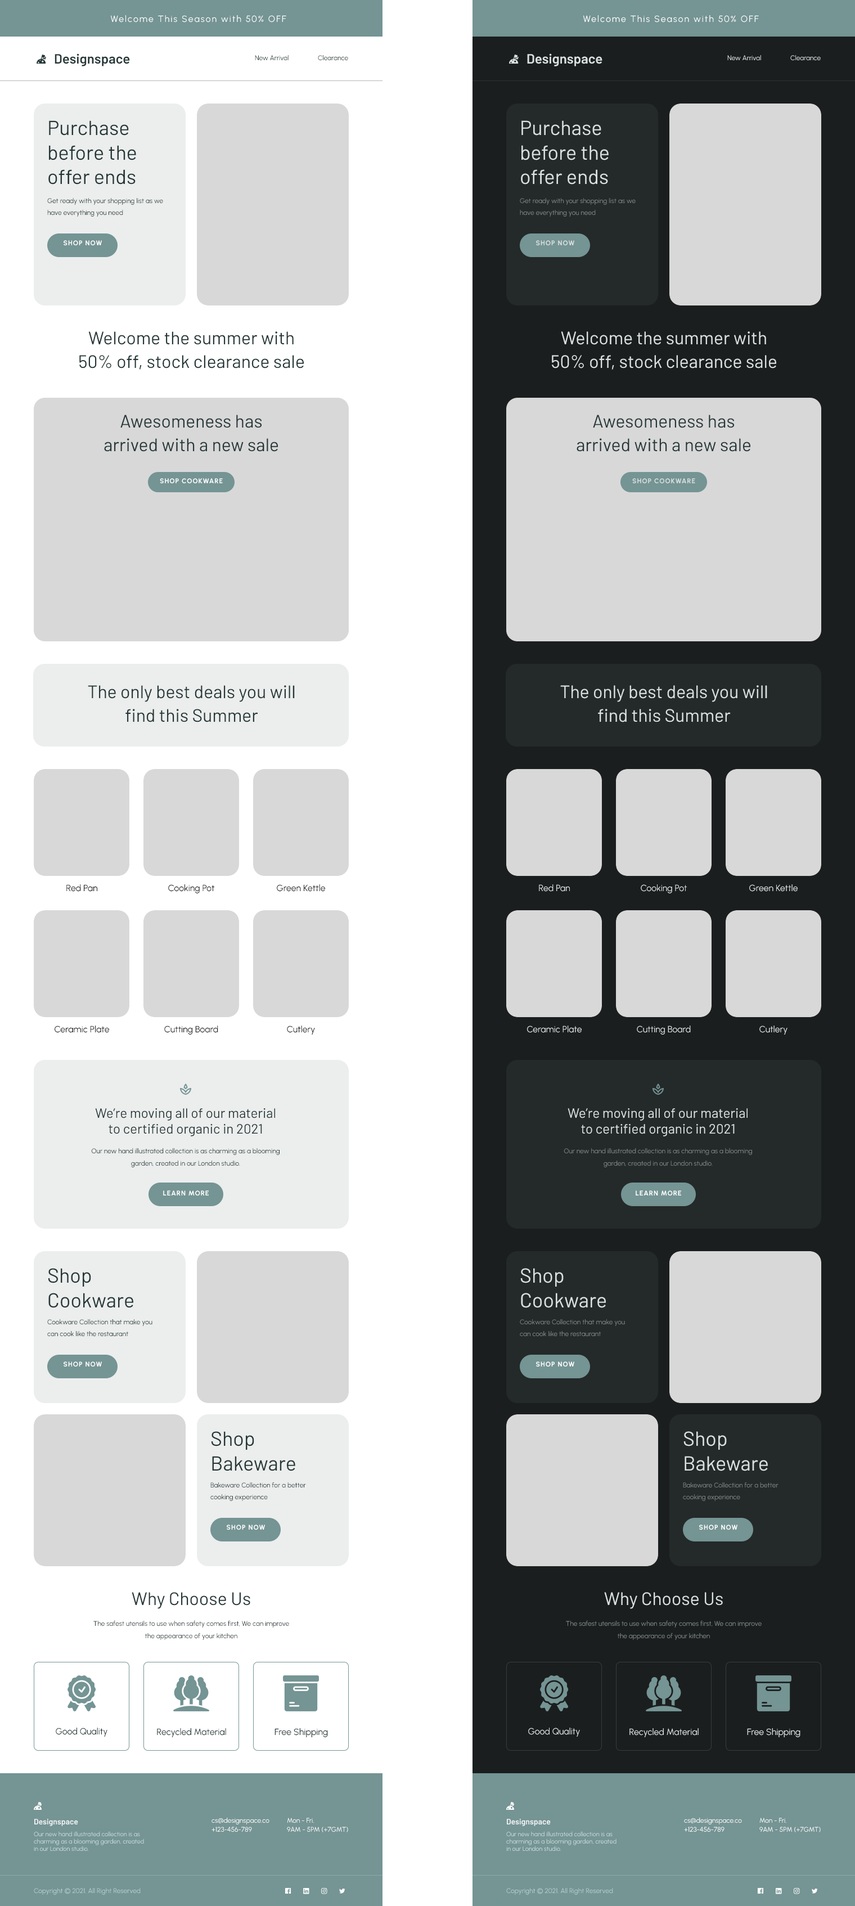
<style>
.page{position:relative;width:855px;height:1906px;background:#ffffff}
.page>*{position:absolute;margin:0}
.t1{font:9px "Urbanist-Regular";letter-spacing:0.125em;color:#ffffff}
.t2{font:13.5px "Barlow-SemiBold";color:#263737}
.t3{font:13.5px "Barlow-SemiBold";color:#dae0e0}
.t4{font:6.8px "Urbanist-Regular";color:#263737}
.t5{font:6.8px "Urbanist-Regular";color:#dae0e0}
.t6{font:20.2px "Barlow-Regular";color:#263737}
.t7{font:20.2px "Barlow-Regular";color:#dae0e0}
.t8{font:6.8px/11.8px "Urbanist-Regular";color:#263737}
.t9{font:6.8px/11.8px "Urbanist-Regular";color:#7d8686}
.t10{font:6.8px "Urbanist-Bold";letter-spacing:0.083em;color:#ffffff;text-transform:uppercase}
.t11{font:6.8px "Urbanist-Bold";letter-spacing:0.083em;color:#dae0e0;text-transform:uppercase}
.t12{font:18px/23.6px "Barlow-Regular";color:#263737}
.t13{font:18px/23.6px "Barlow-Regular";color:#dae0e0}
.t14{font:9px "Urbanist-Regular";color:#1b1b1b}
.t15{font:9px "Urbanist-Regular";color:#dae0e0}
.t16{font:13.5px "Barlow-Regular";color:#263737}
.t17{font:13.5px "Barlow-Regular";color:#dae0e0}
.t18{font:6.8px/12.4px "Urbanist-Regular";color:#263737}
.t19{font:6.8px/12.4px "Urbanist-Regular";color:#7d8686}
.t20{font:18px "Barlow-Regular";color:#263737}
.t21{font:18px "Barlow-Regular";color:#dae0e0}
.t22{font:9px "Urbanist-Regular";color:#263737}
.t23{font:6.8px/9px "Urbanist-Regular";color:#ffffff}
.t24{font:7.9px "Barlow-SemiBold";color:#f3f5f7}
.t25{font:6.2px/7.3px "Urbanist-Regular";color:#cadddd}
.t26{font:6.8px "Urbanist-Regular";color:#b7d1d1}
</style>
<div class="page">
<p class="t1" style="left:110px;top:15px;width:176px;height:7px">Welcome This Season with 50% OFF</p>
<p class="t1" style="left:583px;top:15px;width:176px;height:7px">Welcome This Season with 50% OFF</p>
<p class="t2" style="left:55px;top:53px;width:75px;height:13px">Designspace</p>
<p class="t3" style="left:527px;top:53px;width:75px;height:13px">Designspace</p>
<p class="t4" style="left:255px;top:55px;width:34px;height:6px">New Arrival</p>
<p class="t4" style="left:318px;top:55px;width:30px;height:6px">Clearance</p>
<p class="t5" style="left:727px;top:55px;width:34px;height:6px">New Arrival</p>
<p class="t5" style="left:790px;top:55px;width:31px;height:6px">Clearance</p>
<p class="t6" style="left:48px;top:120px;width:88px;height:64px">Purchase before the offer ends</p>
<p class="t7" style="left:521px;top:120px;width:88px;height:64px">Purchase before the offer ends</p>
<p class="t8" style="left:47px;top:198px;width:116px;height:19px">Get ready with your shopping list as we have everything you need</p>
<p class="t9" style="left:520px;top:198px;width:116px;height:19px">Get ready with your shopping list as we have everything you need</p>
<p class="t10" style="left:64px;top:240px;width:38px;height:6px">Shop Now</p>
<p class="t11" style="left:536px;top:240px;width:39px;height:6px">Shop Now</p>
<p class="t12" style="left:79px;top:331px;width:225px;height:39px;text-align:center">Welcome the summer with 50% off, stock clearance sale</p>
<p class="t12" style="left:79px;top:331px;width:225px;height:39px;text-align:center">Welcome the summer with 50% off, stock clearance sale</p>
<p class="t13" style="left:552px;top:331px;width:224px;height:39px;text-align:center">Welcome the summer with 50% off, stock clearance sale</p>
<p class="t13" style="left:552px;top:331px;width:224px;height:39px;text-align:center">Welcome the summer with 50% off, stock clearance sale</p>
<p class="t12" style="left:104px;top:415px;width:174px;height:37px;text-align:center">Awesomeness has arrived with a new sale</p>
<p class="t12" style="left:577px;top:415px;width:174px;height:37px;text-align:center">Awesomeness has arrived with a new sale</p>
<p class="t10" style="left:160px;top:478px;width:63px;height:6px">Shop Cookware</p>
<p class="t11" style="left:632px;top:478px;width:63px;height:6px">Shop Cookware</p>
<p class="t12" style="left:88px;top:685px;width:207px;height:37px;text-align:center">The only best deals you will find this Summer</p>
<p class="t13" style="left:560px;top:685px;width:207px;height:37px;text-align:center">The only best deals you will find this Summer</p>
<p class="t14" style="left:66px;top:884px;width:32px;height:8px">Red Pan</p>
<p class="t14" style="left:168px;top:884px;width:46px;height:9px">Cooking Pot</p>
<p class="t14" style="left:277px;top:884px;width:49px;height:8px">Green Kettle</p>
<p class="t15" style="left:539px;top:884px;width:31px;height:8px">Red Pan</p>
<p class="t15" style="left:641px;top:884px;width:46px;height:9px">Cooking Pot</p>
<p class="t15" style="left:749px;top:884px;width:49px;height:8px">Green Kettle</p>
<p class="t14" style="left:55px;top:1025px;width:55px;height:8px">Ceramic Plate</p>
<p class="t14" style="left:164px;top:1025px;width:54px;height:9px">Cutting Board</p>
<p class="t14" style="left:287px;top:1025px;width:28px;height:9px">Cutlery</p>
<p class="t15" style="left:527px;top:1025px;width:55px;height:8px">Ceramic Plate</p>
<p class="t15" style="left:637px;top:1025px;width:54px;height:9px">Cutting Board</p>
<p class="t15" style="left:759px;top:1025px;width:29px;height:9px">Cutlery</p>
<p class="t16" style="left:95px;top:1108px;width:181px;height:28px;text-align:center">We’re moving all of our material<br>to certified organic in 2021</p>
<p class="t17" style="left:568px;top:1108px;width:180px;height:28px;text-align:center">We’re moving all of our material<br>to certified organic in 2021</p>
<p class="t18" style="left:91px;top:1148px;width:189px;height:19px;text-align:center">Our new hand illustrated collection is as charming as a blooming garden, created in our London studio.</p>
<p class="t19" style="left:564px;top:1148px;width:188px;height:19px;text-align:center">Our new hand illustrated collection is as charming as a blooming garden, created in our London studio.</p>
<p class="t10" style="left:163px;top:1190px;width:46px;height:6px">LEARN MORE</p>
<p class="t10" style="left:636px;top:1190px;width:45px;height:6px">LEARN MORE</p>
<p class="t6" style="left:48px;top:1268px;width:85px;height:40px">Shop Cookware</p>
<p class="t7" style="left:520px;top:1268px;width:86px;height:40px">Shop Cookware</p>
<p class="t8" style="left:47px;top:1319px;width:105px;height:17px">Cookware Collection that make you can cook like the restaurant</p>
<p class="t9" style="left:520px;top:1319px;width:105px;height:17px">Cookware Collection that make you can cook like the restaurant</p>
<p class="t10" style="left:64px;top:1361px;width:38px;height:6px">Shop Now</p>
<p class="t10" style="left:536px;top:1361px;width:39px;height:6px">Shop Now</p>
<p class="t6" style="left:211px;top:1431px;width:84px;height:40px">Shop Bakeware</p>
<p class="t7" style="left:683px;top:1431px;width:85px;height:40px">Shop Bakeware</p>
<p class="t8" style="left:210px;top:1482px;width:96px;height:19px">Bakeware Collection for a better cooking experience</p>
<p class="t9" style="left:683px;top:1482px;width:95px;height:19px">Bakeware Collection for a better cooking experience</p>
<p class="t10" style="left:227px;top:1524px;width:39px;height:6px">Shop Now</p>
<p class="t10" style="left:699px;top:1524px;width:39px;height:6px">Shop Now</p>
<p class="t20" style="left:132px;top:1592px;width:118px;height:17px">Why Choose Us</p>
<p class="t21" style="left:604px;top:1592px;width:119px;height:17px">Why Choose Us</p>
<p class="t18" style="left:93px;top:1620px;width:196px;height:20px;text-align:center">The safest utensils to use when safety comes first, We can improve the appearance of your kitchen</p>
<p class="t19" style="left:566px;top:1620px;width:196px;height:20px;text-align:center">The safest utensils to use when safety comes first, We can improve the appearance of your kitchen</p>
<p class="t22" style="left:56px;top:1727px;width:51px;height:9px">Good Quality</p>
<p class="t22" style="left:157px;top:1728px;width:69px;height:9px">Recycled Material</p>
<p class="t22" style="left:274px;top:1728px;width:54px;height:9px">Free Shipping</p>
<p class="t15" style="left:528px;top:1727px;width:52px;height:9px">Good Quality</p>
<p class="t15" style="left:629px;top:1728px;width:70px;height:9px">Recycled Material</p>
<p class="t15" style="left:747px;top:1728px;width:53px;height:9px">Free Shipping</p>
<p class="t23" style="left:212px;top:1817px;width:57px;height:15px">cs@designspace.co<br>+123-456-789</p>
<p class="t23" style="left:287px;top:1817px;width:61px;height:15px">Mon - Fri.<br>9AM - 5PM (+7GMT)</p>
<p class="t23" style="left:684px;top:1817px;width:58px;height:15px">cs@designspace.co<br>+123-456-789</p>
<p class="t23" style="left:759px;top:1817px;width:62px;height:15px">Mon - Fri.<br>9AM - 5PM (+7GMT)</p>
<p class="t24" style="left:34px;top:1818px;width:44px;height:8px">Designspace</p>
<p class="t24" style="left:507px;top:1818px;width:44px;height:8px">Designspace</p>
<p class="t25" style="left:34px;top:1831px;width:110px;height:20px">Our new hand illustrated collection is as charming as a blooming garden, created in our London studio.</p>
<p class="t25" style="left:506px;top:1831px;width:110px;height:20px">Our new hand illustrated collection is as charming as a blooming garden, created in our London studio.</p>
<p class="t26" style="left:34px;top:1888px;width:107px;height:6px">Copyright © 2021. All Right Reserved</p>
<p class="t26" style="left:506px;top:1888px;width:107px;height:6px">Copyright © 2021. All Right Reserved</p>
</div>
